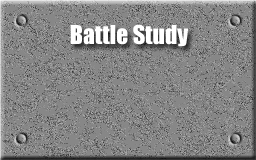
<style>
.page{position:relative;width:256px;height:160px;background:#878787}
.page>*{position:absolute;margin:0}
.t1{font:24px "Impact";color:#ffffff}
</style>
<div class="page">
<p class="t1" style="left:70px;top:24px;width:119px;height:23px">Battle Study</p>
</div>
